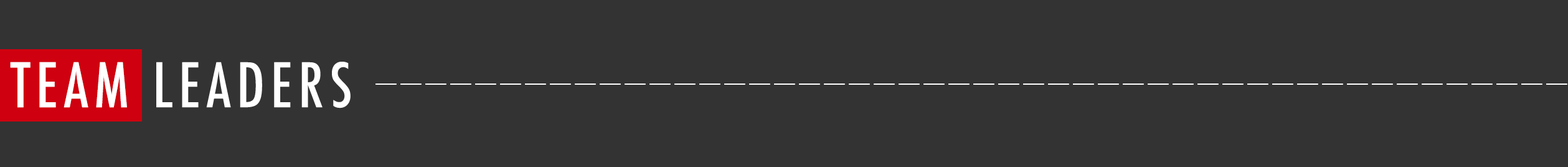
<style>
.page{position:relative;width:1568px;height:167px;background:#333333}
.page>*{position:absolute;margin:0}
.t1{font:59.8px "Futura-CondensedMedium";letter-spacing:0.1em;color:#ffffff;text-transform:uppercase}
</style>
<div class="page">
<p class="t1" style="left:10px;top:62px;width:341px;height:46px">team leaders</p>
</div>
